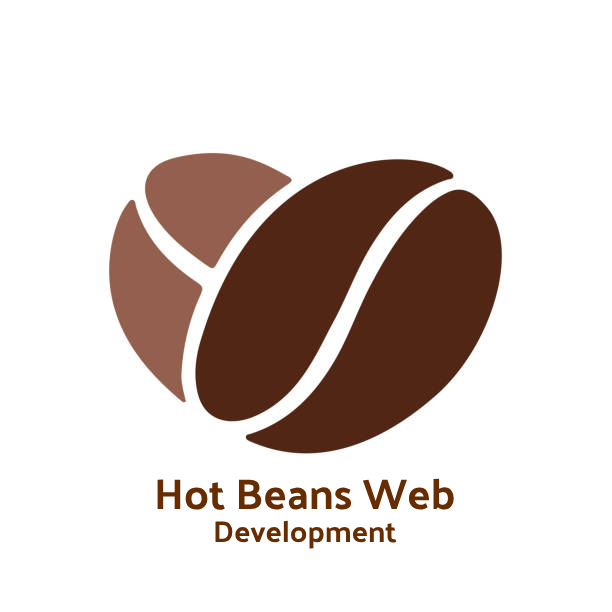
<style>
.page{position:relative;width:612px;height:612px;background:#ffffff}
.page>*{position:absolute;margin:0}
.t1{font:43px "PalanquinDark-Regular";color:#672c00}
.t2{font:30px "PalanquinDark-Regular";color:#672c00}
</style>
<div class="page">
<p class="t1" style="left:157px;top:478px;width:297px;height:32px">Hot Beans Web</p>
<p class="t2" style="left:215px;top:520px;width:182px;height:29px">Development</p>
</div>
